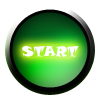
<style>
.page{position:relative;width:100px;height:100px;background:#ffffff}
.page>*{position:absolute;margin:0}
.t1{font:14px "SnapITC-Regular";color:#fdfdfe}
</style>
<div class="page">
<p class="t1" style="left:22px;top:46px;width:57px;height:12px">START</p>
</div>
